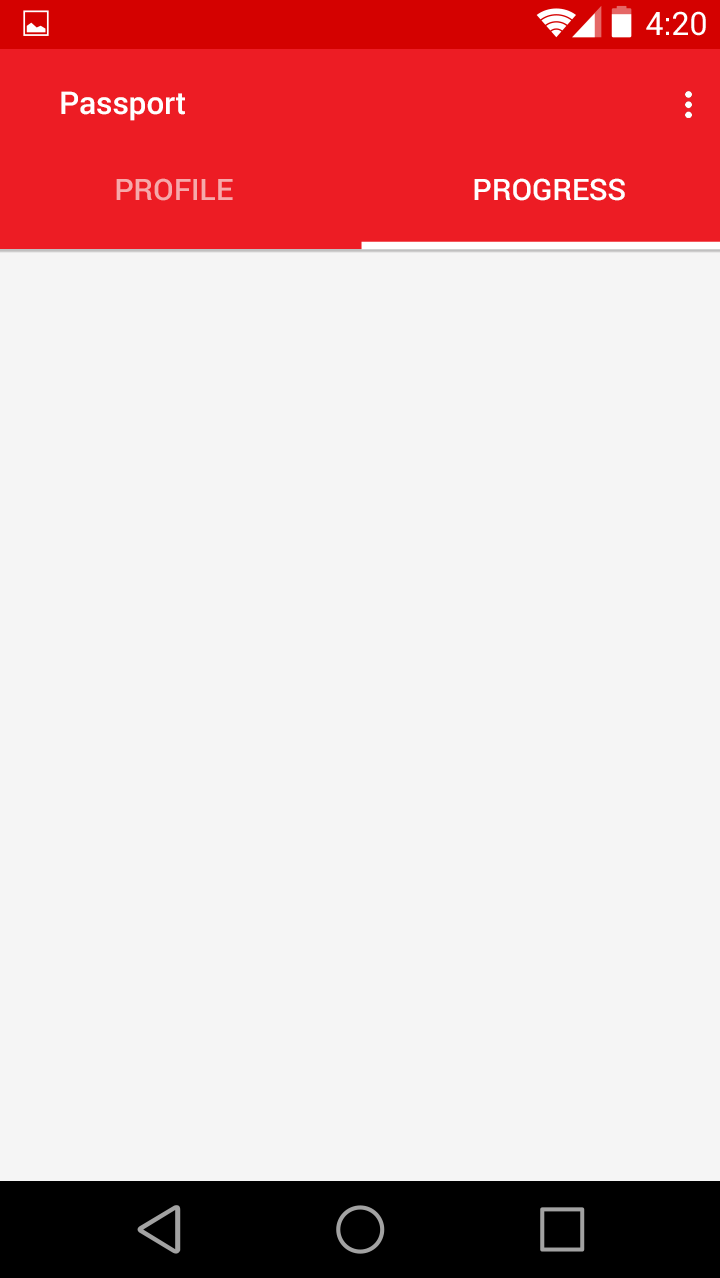
<style>
.page{position:relative;width:720px;height:1278px;background:#f5f5f5}
.page>*{position:absolute;margin:0}
.t1{font:32.2px "Roboto-Regular";color:#ffffff}
.t2{font:31.3px "Roboto-Medium";color:#ffffff}
.t3{font:29.5px "Roboto-Medium";color:#f6a8aa}
.t4{font:29.5px "Roboto-Medium";color:#ffffff}
</style>
<div class="page">
<p class="t1" style="left:646px;top:11px;width:60px;height:25px">4:20</p>
<p class="t2" style="left:61px;top:91px;width:124px;height:30px">Passport</p>
<p class="t3" style="left:116px;top:178px;width:117px;height:23px">PROFILE</p>
<p class="t4" style="left:474px;top:178px;width:151px;height:23px">PROGRESS</p>
</div>
